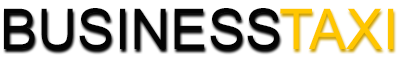
<style>
.page{position:relative;width:400px;height:60px;background:#ffffff}
.page>*{position:absolute;margin:0}
.t1{font:56px "ArialMT";color:#040404}
.t2{font:56px "ArialMT";color:#ffc600}
</style>
<div class="page">
<p class="t1" style="left:4px;top:8px;width:276px;height:42px">BUSINESS</p>
<p class="t2" style="left:280px;top:8px;width:114px;height:41px">TAXI</p>
</div>
